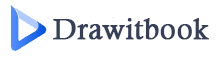
<style>
.page{position:relative;width:217px;height:57px;background:#ffffff}
.page>*{position:absolute;margin:0}
.t1{font:29.3px "CalistoMT";color:#363f5a;font-weight:bold}
</style>
<div class="page">
<p class="t1" style="left:53px;top:18px;width:156px;height:22px">Drawitbook</p>
</div>
